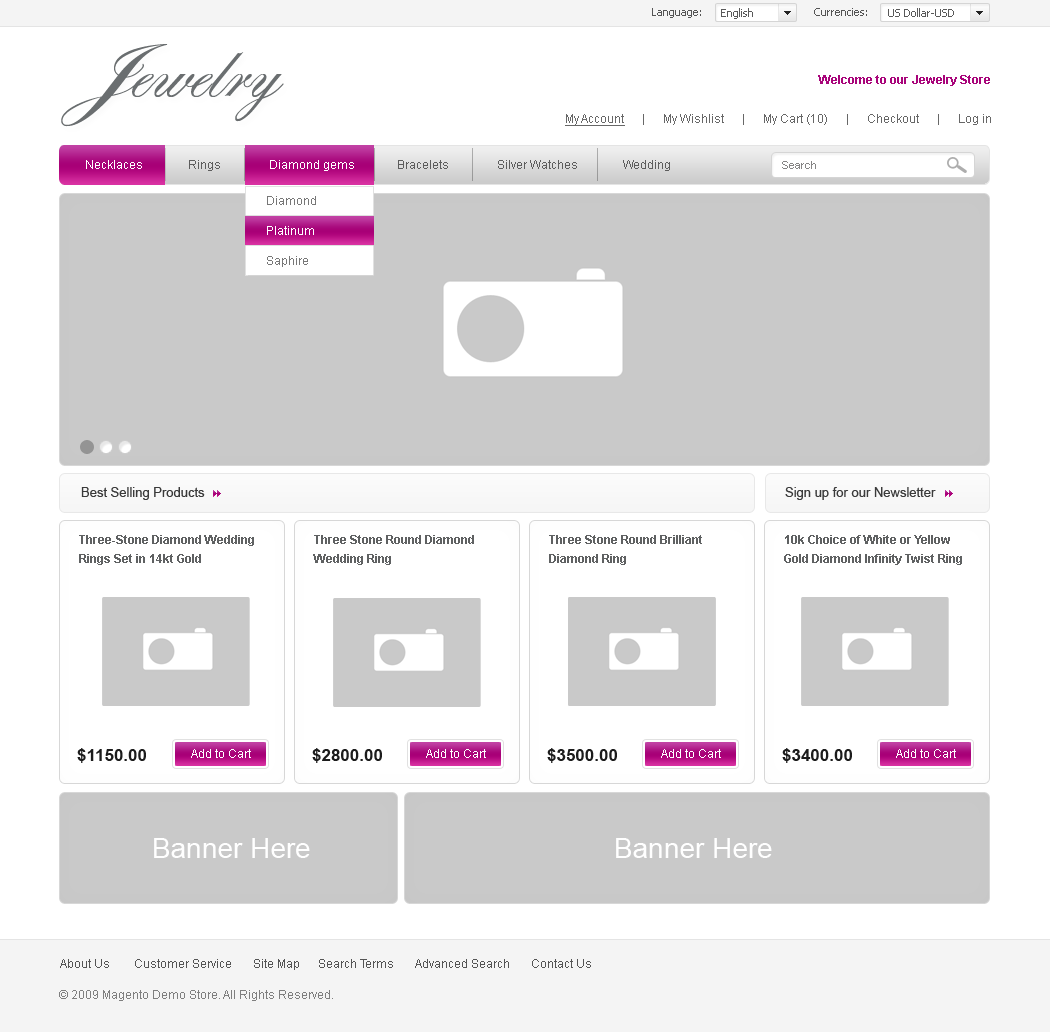
<style>
.page{position:relative;width:1050px;height:1032px;background:#ffffff}
.page>*{position:absolute;margin:0}
.t1{font:11px "Tahoma";color:#545454}
.t2{font:11px "Tahoma";color:#595959}
.t3{font:99px "AlexandraScript";color:#6a6e70;scale:1.11 1}
.t4{font:12px "Arial-BoldMT";color:#a8047a}
.t5{font:12px "ArialMT";color:#676767}
.t6{font:12px "ArialMT";color:#676767;text-decoration:underline}
.t7{font:12px "ArialMT";color:#5d5d5d}
.t8{font:12px "ArialMT";color:#585757}
.t9{font:12px "ArialMT";color:#ffffff}
.t10{font:11px "ArialMT";color:#858484}
.t11{font:12px "ArialMT";color:#777777}
.t12{font:13px "ArialMT";color:#3a3a3a}
.t13{font:13px "ArialMT";color:#3b3b3b}
.t14{font:12px/19px "Arial-BoldMT";color:#5f6162}
.t15{font:17px "Arial-BoldMT";color:#1c1c1c}
.t16{font:28px "ArialMT";color:#ffffff}
.t17{font:12px "ArialMT";color:#545454}
.t18{font:12px "ArialMT";color:#7f7f7f}
</style>
<div class="page">
<p class="t1" style="left:652px;top:8px;width:49px;height:10px">Language:</p>
<p class="t2" style="left:721px;top:8px;width:32px;height:11px">English</p>
<p class="t1" style="left:814px;top:8px;width:53px;height:8px">Currencies:</p>
<p class="t2" style="left:888px;top:8px;width:66px;height:9px">US Dollar-USD</p>
<p class="t3" style="left:61px;top:44px;width:223px;height:83px">Jewelry</p>
<p class="t4" style="left:818px;top:75px;width:172px;height:11px">Welcome to our Jewelry Store</p>
<p class="t5" style="left:565px;top:114px;width:426px;height:12px"><span class="t6">My Account</span>      |      My Wishlist      |      My Cart (10)      |      Checkout      |      Log in</p>
<p class="t7" style="left:86px;top:160px;width:584px;height:11px"><span class="t8"><br></span><span class="t9">Necklaces              </span> Rings              <span class="t9">  Diamond gems             </span> Bracelets                Silver Watches               Wedding</p>
<p class="t10" style="left:782px;top:161px;width:34px;height:8px">Search</p>
<p class="t11" style="left:267px;top:196px;width:49px;height:9px">Diamond</p>
<p class="t9" style="left:267px;top:226px;width:47px;height:9px">Platinum</p>
<p class="t11" style="left:267px;top:256px;width:41px;height:11px">Saphire</p>
<p class="t12" style="left:81px;top:487px;width:124px;height:13px">Best Selling Products</p>
<p class="t13" style="left:785px;top:487px;width:151px;height:13px">Sign up for our Newsletter</p>
<p class="t14" style="left:79px;top:535px;width:175px;height:30px">Three-Stone Diamond Wedding Rings Set in 14kt Gold</p>
<p class="t14" style="left:313px;top:535px;width:161px;height:30px">Three Stone Round Diamond Wedding Ring</p>
<p class="t14" style="left:549px;top:535px;width:153px;height:30px">Three Stone Round Brilliant Diamond Ring</p>
<p class="t14" style="left:784px;top:535px;width:178px;height:30px">10k Choice of White or Yellow Gold Diamond Infinity Twist Ring</p>
<p class="t15" style="left:77px;top:748px;width:69px;height:15px">$1150.00</p>
<p class="t9" style="left:191px;top:749px;width:60px;height:9px">Add to Cart</p>
<p class="t15" style="left:312px;top:748px;width:70px;height:15px">$2800.00</p>
<p class="t9" style="left:426px;top:749px;width:60px;height:9px">Add to Cart</p>
<p class="t15" style="left:547px;top:748px;width:70px;height:15px">$3500.00</p>
<p class="t9" style="left:661px;top:749px;width:60px;height:9px">Add to Cart</p>
<p class="t15" style="left:782px;top:748px;width:70px;height:15px">$3400.00</p>
<p class="t9" style="left:896px;top:749px;width:60px;height:9px">Add to Cart</p>
<p class="t16" style="left:154px;top:838px;width:156px;height:20px">Banner Here</p>
<p class="t16" style="left:616px;top:838px;width:156px;height:20px">Banner Here</p>
<p class="t17" style="left:60px;top:959px;width:531px;height:11px">About Us        Customer Service       Site Map      Search Terms       Advanced Search       Contact Us</p>
<p class="t18" style="left:59px;top:990px;width:274px;height:11px">© 2009 Magento Demo Store. All Rights Reserved.</p>
</div>
